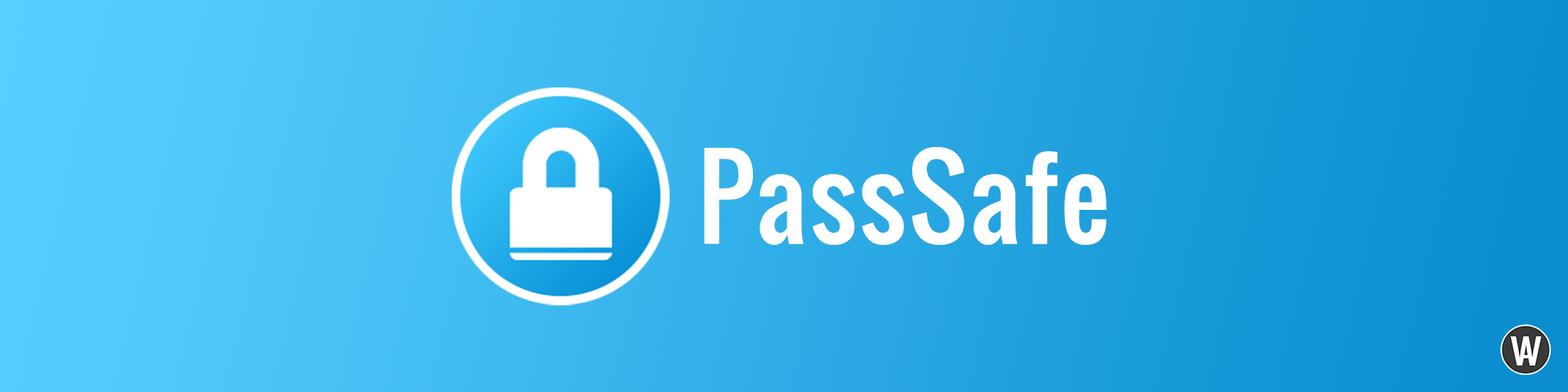
<style>
.page{position:relative;width:1568px;height:392px}
.page>*{position:absolute;margin:0}
.t1{font:108.6px "Oswald-Regular";color:#ffffff;font-weight:bold}
</style>
<div class="page">
<p class="t1" style="left:704px;top:147px;width:403px;height:98px">PassSafe</p>
</div>
